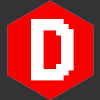
<style>
.page{position:relative;width:100px;height:100px;background:#f90000}
.page>*{position:absolute;margin:0}
.t1{font:80px "Fixedsys";color:#ffffff;font-weight:bold}
</style>
<div class="page">
<p class="t1" style="left:31px;top:19px;width:43px;height:62px">D</p>
</div>
